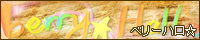
<style>
.page{position:relative;width:200px;height:40px}
.page>*{position:absolute;margin:0}
.t1{font:12px "MS-PGothic";color:#ffffff}
</style>
<div class="page">
<p class="t1" style="left:131px;top:25px;width:65px;height:11px">ベリーハロ☆</p>
</div>
